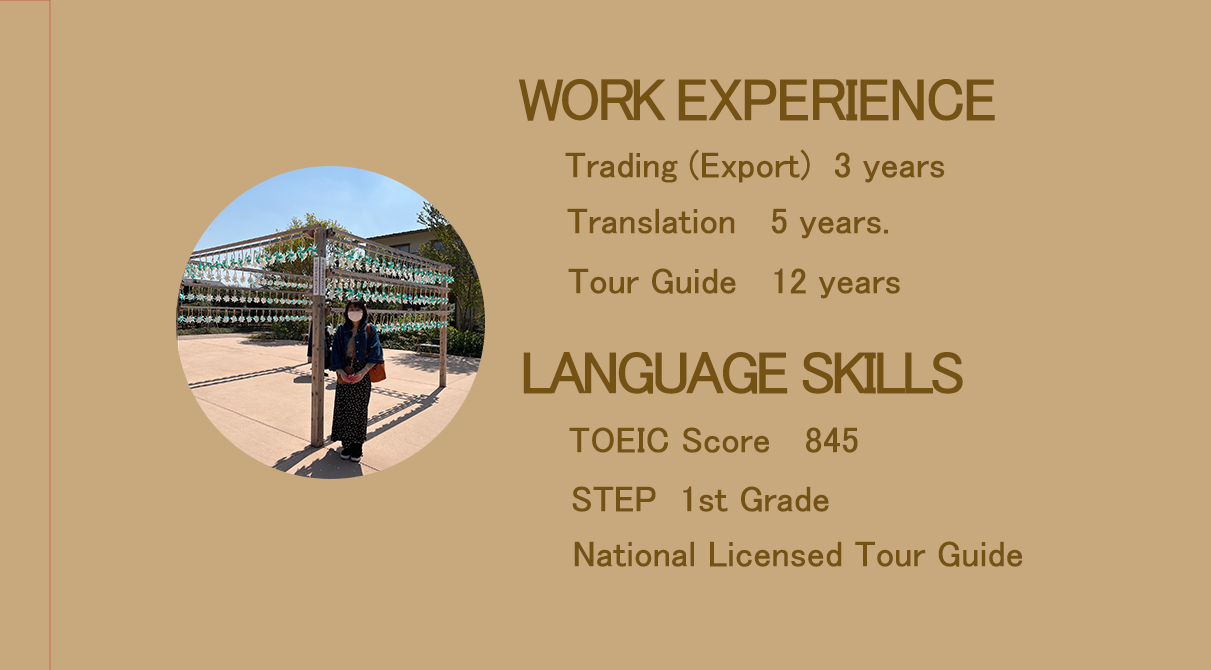
<style>
.page{position:relative;width:1211px;height:670px;background:#c8a87d}
.page>*{position:absolute;margin:0}
.t1{font:60px "MS-PGothic";letter-spacing:-0.06em;color:#735214;font-weight:bold}
.t2{font:60px "MS-PGothic";letter-spacing:-0.1em;color:#735214;font-weight:bold}
.t3{font:36px "MS-PGothic";letter-spacing:-0.02em;color:#735214;font-weight:bold}
</style>
<div class="page">
<p class="t1" style="left:519px;top:79px;width:476px;height:42px"><span class="t2">WORK </span>EXPERIENCE</p>
<p class="t3" style="left:565px;top:149px;width:380px;height:34px">Trading (Export)  3 years</p>
<p class="t3" style="left:567px;top:208px;width:321px;height:31px">Translation   5 years.</p>
<p class="t3" style="left:568px;top:268px;width:332px;height:31px">Tour Guide   12 years</p>
<p class="t2" style="left:523px;top:352px;width:440px;height:42px">LANGUAGE SKILLS</p>
<p class="t3" style="left:569px;top:427px;width:289px;height:26px">TOEIC Score   845</p>
<p class="t3" style="left:572px;top:486px;width:257px;height:26px">STEP  1st Grade</p>
<p class="t3" style="left:574px;top:541px;width:449px;height:26px">National Licensed Tour Guide</p>
</div>
